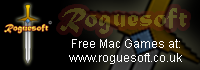
<style>
.page{position:relative;width:200px;height:70px;background:#000000}
.page>*{position:absolute;margin:0}
.t1{font:28.2px "MaturaMTScriptCapitals"}
.t2{font:12px "ArialMT";color:#ffffff}
</style>
<div class="page">
<p class="t1" style="left:60px;top:8px;width:127px;height:26px">Roguesoft</p>
<p class="t2" style="left:69px;top:39px;width:113px;height:25px;text-align:center">Free Mac Games at:<br>www.roguesoft.co.uk</p>
</div>
